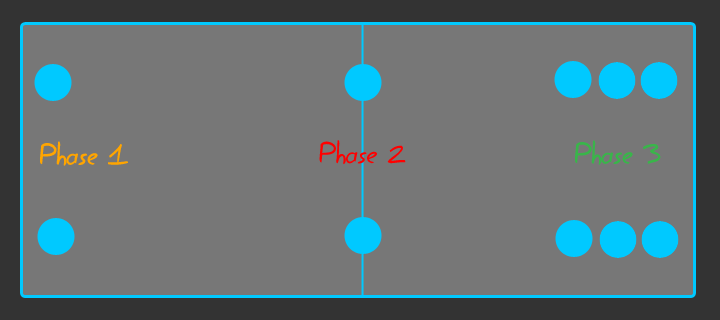
<style>
.page{position:relative;width:720px;height:320px;background:#777777}
.page>*{position:absolute;margin:0}
.t1{font:30px "EasySpeech";color:#ffa500}
.t2{font:30px "EasySpeech";color:#ff0000}
.t3{font:30px "EasySpeech";color:#39b54a}
</style>
<div class="page">
<p class="t1" style="left:40px;top:141px;width:88px;height:25px">Phase 1</p>
<p class="t2" style="left:319px;top:140px;width:87px;height:25px">Phase 2</p>
<p class="t3" style="left:575px;top:140px;width:86px;height:25px">Phase 3</p>
</div>
